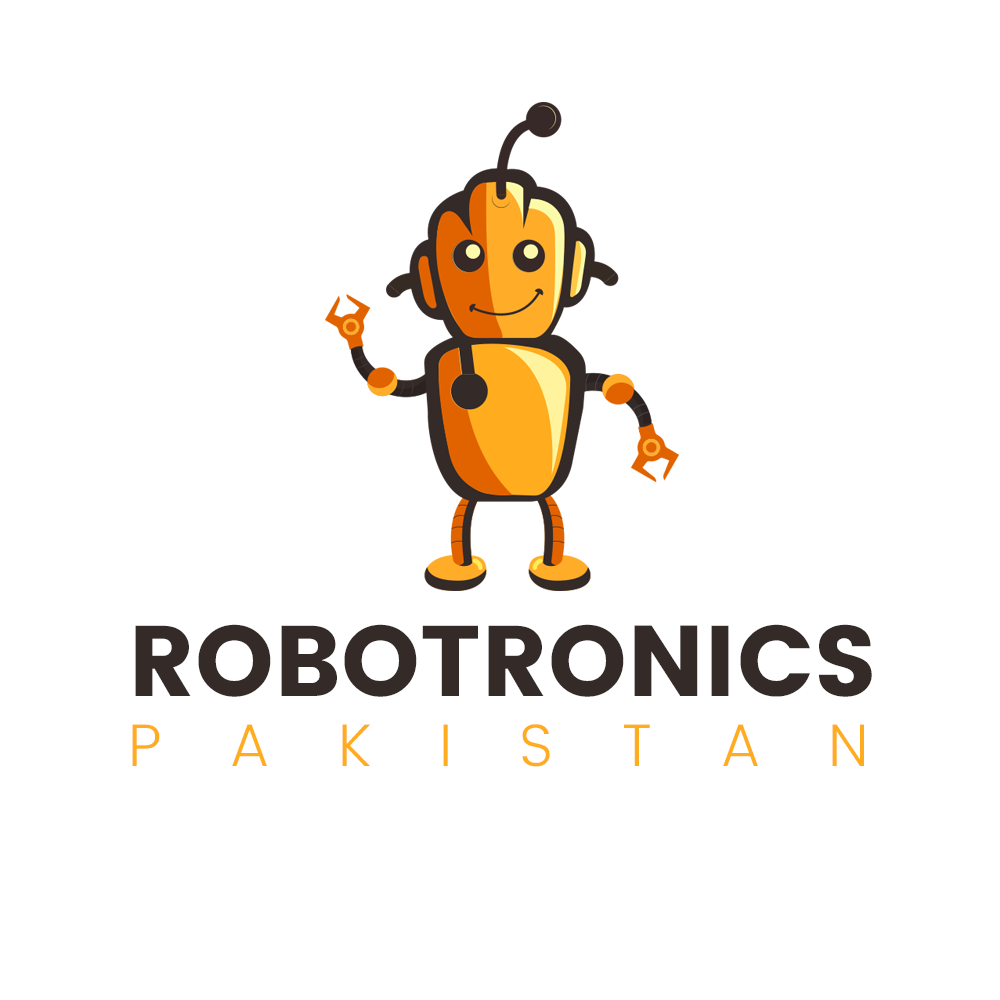
<style>
.page{position:relative;width:1000px;height:1000px;background:#ffffff}
.page>*{position:absolute;margin:0}
.t1{font:100px "Poppins-Bold";color:#342a28}
.t2{font:60px "Poppins-Light";letter-spacing:1.12em;color:#ffac1f}
</style>
<div class="page">
<p class="t1" style="left:135px;top:624px;width:737px;height:73px">ROBOTRONICS</p>
<p class="t2" style="left:132px;top:724px;width:732px;height:43px">PAKISTAN</p>
</div>
